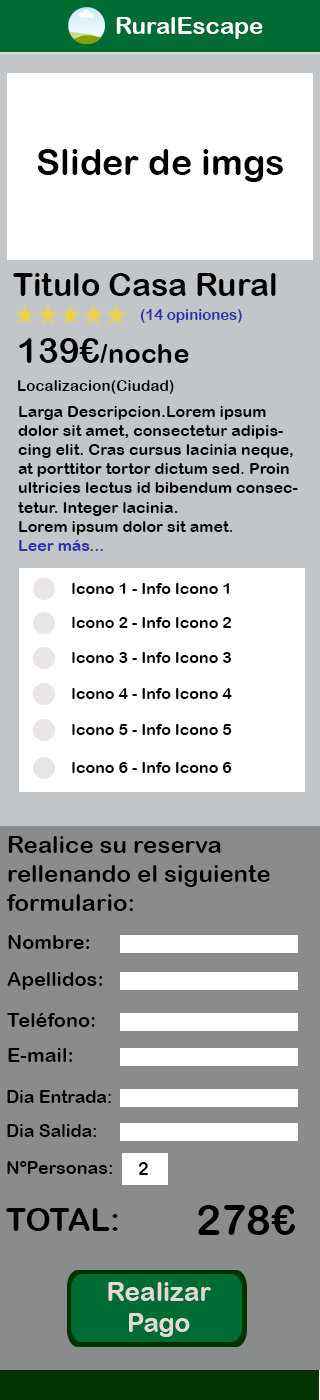
<style>
.page{position:relative;width:320px;height:1400px;background:#ffffff}
.page>*{position:absolute;margin:0}
.t1{font:24px "ArialRoundedMTBold";color:#ffffff}
.t2{font:36px "ArialRoundedMTBold";color:#000000}
.t3{font:32px "ArialRoundedMTBold";color:#000000}
.t4{font:15px "ArialRoundedMTBold";color:#3131aa}
.t5{font:27.5px "ArialRoundedMTBold";color:#000000}
.t6{font:35px "ArialRoundedMTBold";color:#000000}
.t7{font:15.2px "ArialRoundedMTBold";color:#000000}
.t8{font:16px "ArialRoundedMTBold";color:#000000}
.t9{font:16px "ArialRoundedMTBold";color:#3131aa}
.t10{font:24px "ArialRoundedMTBold";color:#000000}
.t11{font:20px "ArialRoundedMTBold";color:#000000}
.t12{font:17.6px "ArialRoundedMTBold";color:#000000}
.t13{font:18px "ArialRoundedMTBold";color:#000000}
.t14{font:42px "ArialRoundedMTBold";color:#000000}
.t15{font:26px "ArialRoundedMTBold";color:#e1dbd8}
</style>
<div class="page">
<p class="t1" style="left:116px;top:17px;width:147px;height:22px">RuralEscape</p>
<p class="t2" style="left:37px;top:149px;width:246px;height:33px">Slider de imgs</p>
<p class="t3" style="left:13px;top:273px;width:263px;height:23px">Titulo Casa Rural</p>
<p class="t4" style="left:140px;top:309px;width:102px;height:14px">(14 opiniones)</p>
<p class="t5" style="left:19px;top:338px;width:170px;height:25px"><span class="t6">139€</span>/noche</p>
<p class="t7" style="left:18px;top:380px;width:156px;height:14px">Localizacion(Ciudad)</p>
<p class="t8" style="left:18px;top:406px;width:280px;height:145px">Larga Descripcion.Lorem ipsum dolor sit amet, consectetur adipiscing elit. Cras cursus lacinia neque, at porttitor tortor dictum sed. Proin ultricies lectus id bibendum consectetur. Integer lacinia.<br>Lorem ipsum dolor sit amet.<br><span class="t9">Leer más...</span></p>
<p class="t8" style="left:72px;top:583px;width:157px;height:11px">Icono 1 - Info Icono 1</p>
<p class="t8" style="left:72px;top:617px;width:160px;height:11px">Icono 2 - Info Icono 2</p>
<p class="t8" style="left:72px;top:652px;width:160px;height:11px">Icono 3 - Info Icono 3</p>
<p class="t8" style="left:72px;top:688px;width:160px;height:11px">Icono 4 - Info Icono 4</p>
<p class="t8" style="left:72px;top:724px;width:160px;height:11px">Icono 5 - Info Icono 5</p>
<p class="t8" style="left:72px;top:762px;width:160px;height:11px">Icono 6 - Info Icono 6</p>
<p class="t10" style="left:6px;top:836px;width:264px;height:75px">Realice su reserva <br>rellenando el siguiente <br>formulario:</p>
<p class="t11" style="left:8px;top:935px;width:82px;height:14px">Nombre:</p>
<p class="t11" style="left:7px;top:972px;width:96px;height:18px">Apellidos:</p>
<p class="t11" style="left:7px;top:1013px;width:88px;height:14px">Teléfono:</p>
<p class="t11" style="left:8px;top:1048px;width:65px;height:14px">E-mail:</p>
<p class="t12" style="left:7px;top:1090px;width:104px;height:13px">Dia Entrada:</p>
<p class="t12" style="left:7px;top:1124px;width:90px;height:13px">Dia Salida:</p>
<p class="t13" style="left:7px;top:1161px;width:106px;height:13px">NºPersonas:</p>
<p class="t13" style="left:139px;top:1162px;width:9px;height:13px">2</p>
<p class="t14" style="left:198px;top:1205px;width:97px;height:30px">278€</p>
<p class="t3" style="left:6px;top:1208px;width:112px;height:23px">TOTAL:</p>
<p class="t15" style="left:108px;top:1282px;width:103px;height:55px;text-align:center">Realizar<br>Pago</p>
</div>
